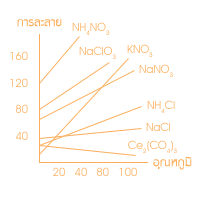
<style>
.page{position:relative;width:200px;height:200px;background:#ffffff}
.page>*{position:absolute;margin:0}
.t1{font:16.7px "DSEPaNuTat";color:#fbaf5d}
.t2{font:11.1px "AvantGardeITCbyBT-Book";color:#fbaf5d}
.t3{font:11.1px "AvantGardeITCbyBT-Book"}
</style>
<div class="page">
<p class="t1" style="left:17px;top:19px;width:45px;height:8px">¡ÒÃÅÐÅÒÂ</p>
<p class="t2" style="left:72px;top:22px;width:38px;height:13px">NH4NO3</p>
<p class="t2" style="left:10px;top:51px;width:18px;height:89px;text-align:right">160<br><br>120<br><br>80<br><br>40</p>
<p class="t2" style="left:79px;top:46px;width:37px;height:13px">NaClO3</p>
<p class="t2" style="left:127px;top:44px;width:26px;height:13px">KNO3</p>
<p class="t2" style="left:139px;top:64px;width:34px;height:13px">NaNO3</p>
<p class="t2" style="left:147px;top:100px;width:28px;height:13px">NH4Cl</p>
<p class="t2" style="left:146px;top:122px;width:24px;height:9px">NaCl</p>
<p class="t3" style="left:128px;top:140px;width:49px;height:13px">Ce2(CO4)3</p>
<p class="t1" style="left:153px;top:157px;width:39px;height:13px">ÍØ³ËÀÙÁÔ</p>
<p class="t2" style="left:53px;top:167px;width:84px;height:9px">20   40   80   100</p>
</div>
